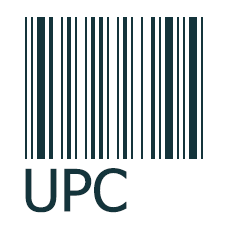
<style>
.page{position:relative;width:225px;height:225px;background:#ffffff}
.page>*{position:absolute;margin:0}
.t1{font:58.3px "Tahoma";color:#14343b}
</style>
<div class="page">
<p class="t1" style="left:25px;top:168px;width:102px;height:45px">UPC</p>
</div>
